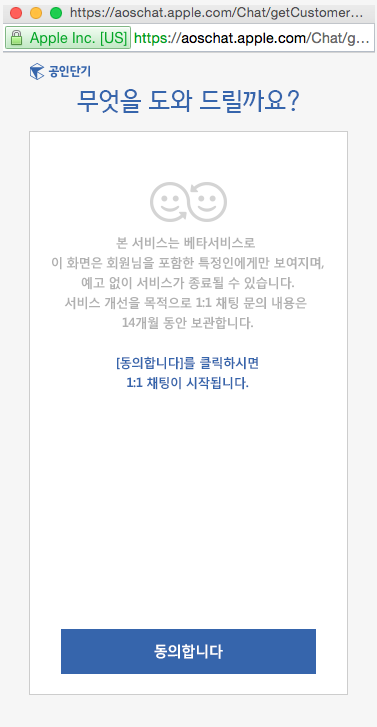
<style>
.page{position:relative;width:377px;height:727px;background:#ffffff}
.page>*{position:absolute;margin:0}
.t1{font:25px "YDotum130";letter-spacing:-0.025em;color:#3665ac}
.t2{font:13px/20px "MalgunGothicBold";letter-spacing:-0.05em;color:#b0b0b0;scale:0.97 1}
.t3{font:13px/20px "MalgunGothicBold";letter-spacing:-0.05em;color:#3665ac;scale:0.97 1}
.t4{font:15px "MalgunGothicBold";letter-spacing:-0.05em;color:#ffffff;scale:0.97 1}
</style>
<div class="page">
<p class="t1" style="left:77px;top:89px;width:222px;height:24px">무엇을 도와 드릴까요?</p>
<p class="t2" style="left:52px;top:236px;width:272px;height:154px;text-align:center">본 서비스는 베타서비스로 <br>이 화면은 회원님을 포함한 특정인에게만 보여지며,<br>예고 없이 서비스가 종료될 수 있습니다.<br>서비스 개선을 목적으로 1:1 채팅 문의 내용은 <br>14개월 동안 보관합니다.<br><br><span class="t3">[동의합니다]를 클릭하시면<br>1:1 채팅이 시작됩니다.</span></p>
<p class="t4" style="left:154px;top:644px;width:69px;height:15px">동의합니다</p>
</div>
